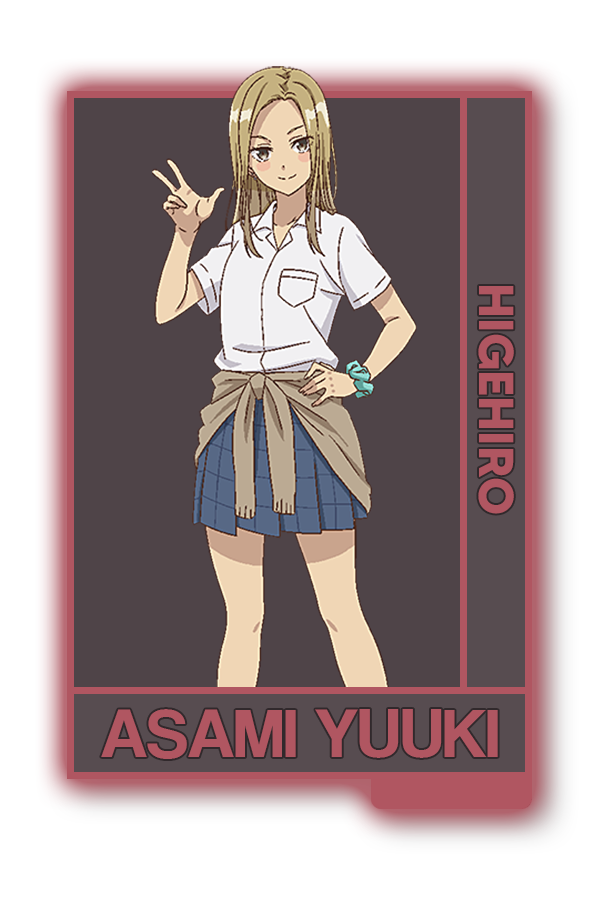
<style>
.page{position:relative;width:600px;height:900px;background:#4f4448}
.page>*{position:absolute;margin:0}
.t1{font:48.8px "MADETOMMY-Bold";color:#b05661}
.t2{font:72.1px "CoolveticaRg-Regular";color:#b05661}
</style>
<div class="page">
<p class="t1" style="left:478px;top:286px;width:36px;height:228px;rotate:90deg">HIGEHIRO</p>
<p class="t2" style="left:101px;top:709px;width:397px;height:50px">ASAMI YUUKI</p>
</div>
